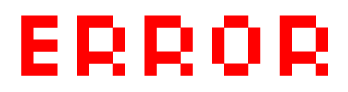
<style>
.page{position:relative;width:348px;height:92px;background:#ffffff}
.page>*{position:absolute;margin:0}
.t1{font:95.9px "04b03";letter-spacing:0.08em;color:#ff0000}
</style>
<div class="page">
<p class="t1" style="left:21px;top:15px;width:307px;height:61px">ERROR</p>
</div>
